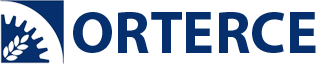
<style>
.page{position:relative;width:318px;height:64px;background:#ffffff}
.page>*{position:absolute;margin:0}
.t1{font:60px "MyriadPro-Bold";color:#062f6d}
</style>
<div class="page">
<p class="t1" style="left:73px;top:12px;width:243px;height:41px">ORTERCE</p>
</div>
